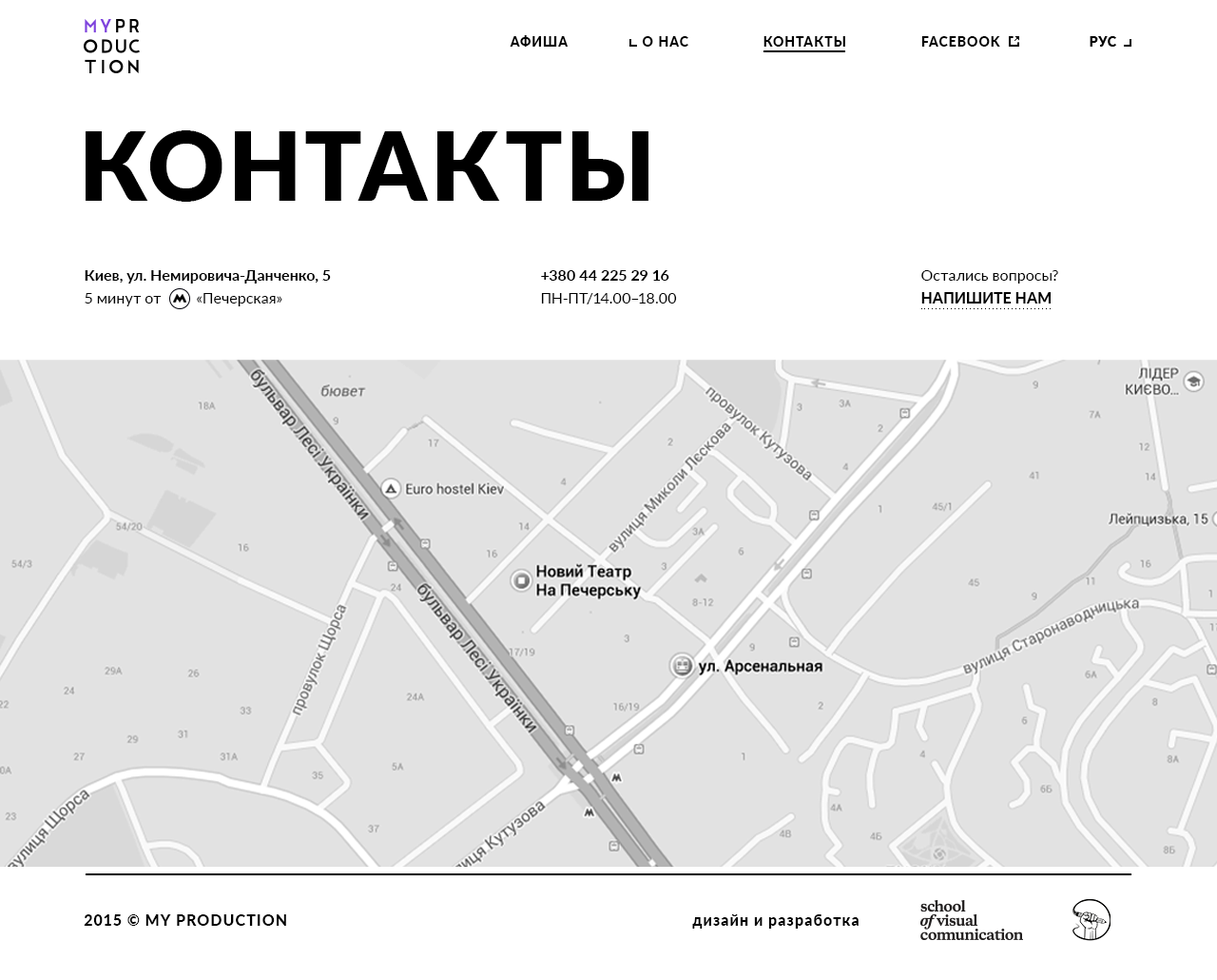
<style>
.page{position:relative;width:1217px;height:980px;background:#ffffff}
.page>*{position:absolute;margin:0}
.t1{font:13.3px "Lato-Heavy";letter-spacing:0.08em;color:#000000}
.t2{font:13.3px "Lato-Heavy";letter-spacing:0.06em;color:#000000}
.t3{font:95.1px "Lato-Black";letter-spacing:0.06em;color:#000000}
.t4{font:17.1px "MyriadPro-Regular";letter-spacing:0.059em;color:#000000}
.t5{font:15.2px/22.8px "Lato-Bold";color:#000000}
.t6{font:15.2px/22.8px "Lato-Regular";color:#000000}
.t7{font:15.2px/22.8px "Lato-Heavy";color:#000000;text-transform:uppercase}
.t8{font:15.2px "Lato-Heavy";letter-spacing:0.06em;color:#000000}
</style>
<div class="page">
<p class="t1" style="left:510px;top:35px;width:59px;height:12px">АФИША</p>
<p class="t1" style="left:642px;top:36px;width:47px;height:11px">О НАС</p>
<p class="t1" style="left:764px;top:36px;width:81px;height:11px">КОНТАКТЫ</p>
<p class="t1" style="left:922px;top:36px;width:78px;height:11px">FACEBOOK</p>
<p class="t2" style="left:1090px;top:36px;width:27px;height:11px">РУС</p>
<p class="t3" style="left:86px;top:130px;width:563px;height:72px"><span class="t4"><br><br></span>КОНТАКТЫ</p>
<p class="t5" style="left:85px;top:270px;width:246px;height:36px">Киев, ул. Немировича-Данченко, 5 <span class="t6">5 минут от         «Печерская»</span></p>
<p class="t5" style="left:541px;top:270px;width:136px;height:34px">+380 44 225 29 16 <br><span class="t6">ПН-ПТ/14.00–18.00</span></p>
<p class="t6" style="left:922px;top:270px;width:136px;height:33px">Остались вопросы?<br><span class="t7">Напишите нам</span></p>
<p class="t8" style="left:84px;top:914px;width:202px;height:11px">2015 © MY PRODUCTION</p>
<p class="t8" style="left:692px;top:914px;width:167px;height:14px">дизайн и разработка</p>
</div>
